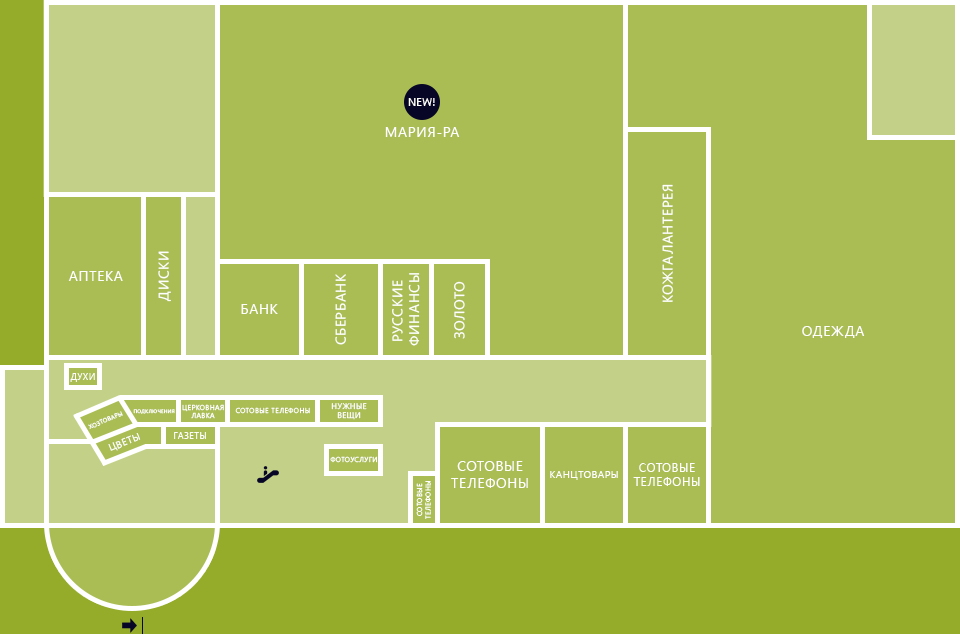
<style>
.page{position:relative;width:960px;height:634px;background:#a9bd54}
.page>*{position:absolute;margin:0}
.t1{font:14px "SegoeUI";letter-spacing:0.05em;color:#ffffff;text-transform:uppercase}
.t2{font:9px "SegoeUI";letter-spacing:0.05em;color:#ffffff;text-transform:uppercase}
.t3{font:6px "SegoeUI";letter-spacing:0.05em;color:#ffffff;text-transform:uppercase}
.t4{font:5px "SegoeUI";letter-spacing:0.05em;color:#ffffff;text-transform:uppercase}
.t5{font:7px "SegoeUI";letter-spacing:0.05em;color:#ffffff;text-transform:uppercase}
.t6{font:8px "SegoeUI";letter-spacing:0.05em;color:#ffffff;text-transform:uppercase}
.t7{font:10px "SegoeUI";letter-spacing:0.05em;color:#ffffff;text-transform:uppercase}
.t8{font:12px "SegoeUI";letter-spacing:0.05em;color:#ffffff;text-transform:uppercase}
</style>
<div class="page">
<p class="t1" style="left:385px;top:127px;width:75px;height:10px">Мария-ра</p>
<p class="t1" style="left:662px;top:184px;width:11px;height:118px;rotate:-90deg">Кожгалантерея</p>
<p class="t1" style="left:158px;top:251px;width:13px;height:51px;rotate:-90deg">Диски</p>
<p class="t1" style="left:68px;top:271px;width:55px;height:10px">Аптека</p>
<p class="t1" style="left:335px;top:274px;width:11px;height:71px;rotate:-90deg">Сбербанк</p>
<p class="t1" style="left:392px;top:273px;width:28px;height:73px;text-align:center;rotate:-90deg">Русские <br>финансы</p>
<p class="t1" style="left:454px;top:281px;width:11px;height:58px;rotate:-90deg">Золото</p>
<p class="t1" style="left:241px;top:304px;width:37px;height:10px">банк</p>
<p class="t1" style="left:802px;top:326px;width:63px;height:12px">Одежда</p>
<p class="t2" style="left:70px;top:373px;width:25px;height:9px">Духи</p>
<p class="t3" style="left:88px;top:411px;width:35px;height:19px;rotate:-23deg">Хозтовары</p>
<p class="t4" style="left:133px;top:409px;width:42px;height:5px">Подключения</p>
<p class="t5" style="left:182px;top:404px;width:42px;height:15px;text-align:center">Церковная<br>лавка</p>
<p class="t5" style="left:235px;top:407px;width:75px;height:7px">Сотовые телефоны</p>
<p class="t6" style="left:331px;top:403px;width:36px;height:17px;text-align:center">Нужные<br>вещи</p>
<p class="t7" style="left:108px;top:433px;width:33px;height:18px;rotate:-22deg">Цветы</p>
<p class="t2" style="left:174px;top:432px;width:32px;height:7px">Газеты</p>
<p class="t5" style="left:330px;top:456px;width:47px;height:7px">Фотоуслуги</p>
<p class="t1" style="left:451px;top:461px;width:77px;height:27px;text-align:center">Сотовые<br>телефоны</p>
<p class="t7" style="left:550px;top:471px;width:68px;height:9px">Канцтовары</p>
<p class="t8" style="left:633px;top:463px;width:67px;height:23px;text-align:center">Сотовые<br>телефоны</p>
<p class="t5" style="left:416px;top:481px;width:15px;height:38px;text-align:center;rotate:-90deg">Сотовые<br>телефоны</p>
</div>
